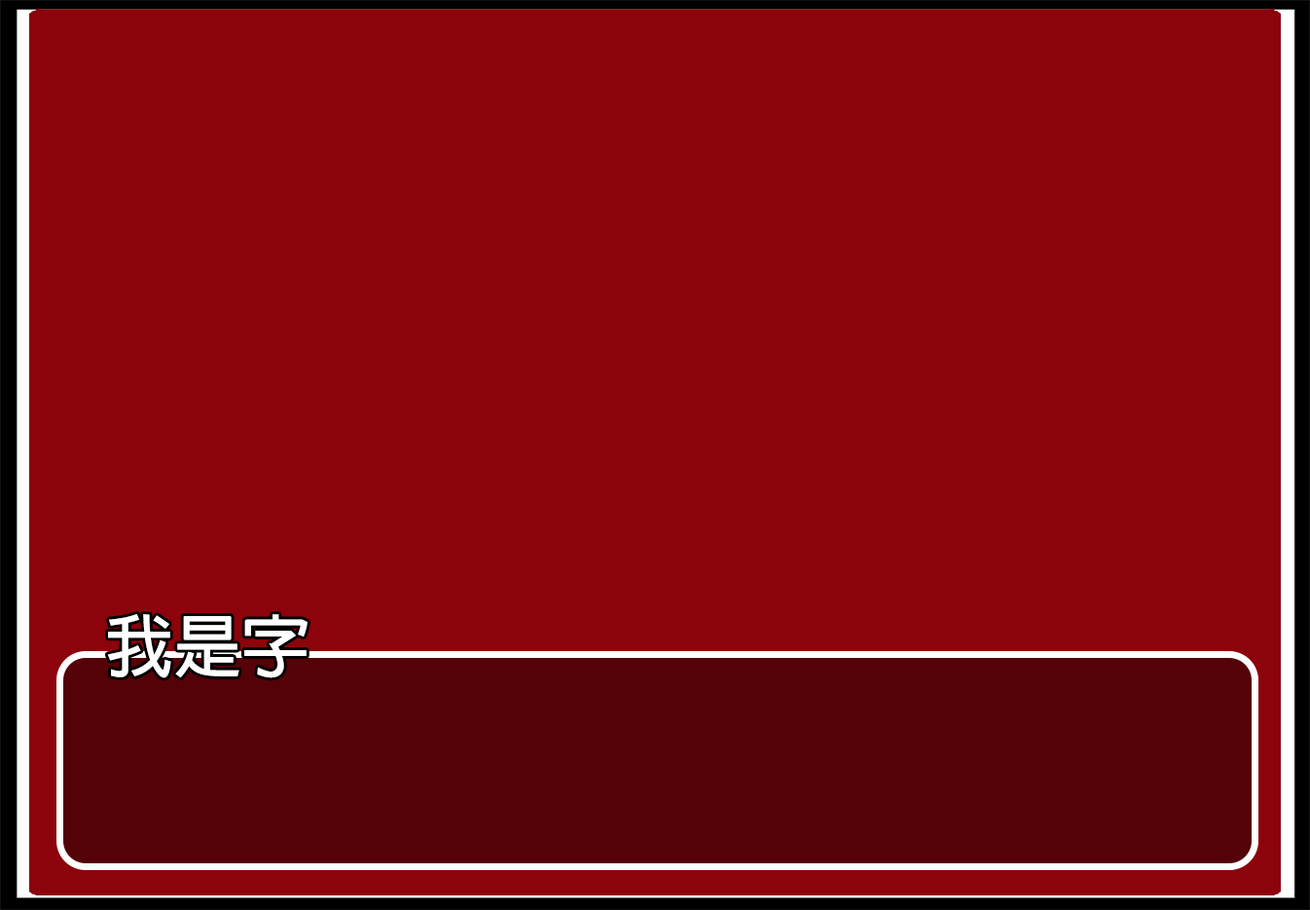
<style>
.page{position:relative;width:1310px;height:910px;background:#8c030b}
.page>*{position:absolute;margin:0}
.t1{font:68.1px "AdobeFanHeitiStd-Bold";color:#ffffff}
</style>
<div class="page">
<p class="t1" style="left:107px;top:614px;width:201px;height:64px">我是字</p>
</div>
